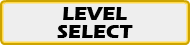
<style>
.page{position:relative;width:190px;height:45px;background:#eeeeee}
.page>*{position:absolute;margin:0}
.t1{font:20px/18px "ErasITC-Bold";color:#000000}
</style>
<div class="page">
<p class="t1" style="left:57px;top:7px;width:76px;height:31px;text-align:center">LEVEL<br>SELECT</p>
</div>
